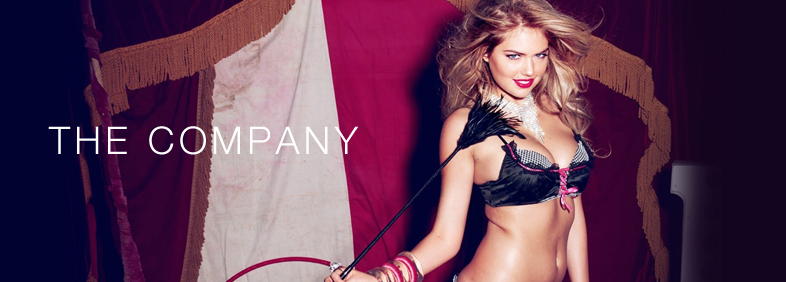
<style>
.page{position:relative;width:786px;height:282px}
.page>*{position:absolute;margin:0}
.t1{font:38px "HelveticaNeue-Light";letter-spacing:0.11em;color:#fefefe}
</style>
<div class="page">
<p class="t1" style="left:48px;top:126px;width:311px;height:29px">THE COMPANY</p>
</div>
